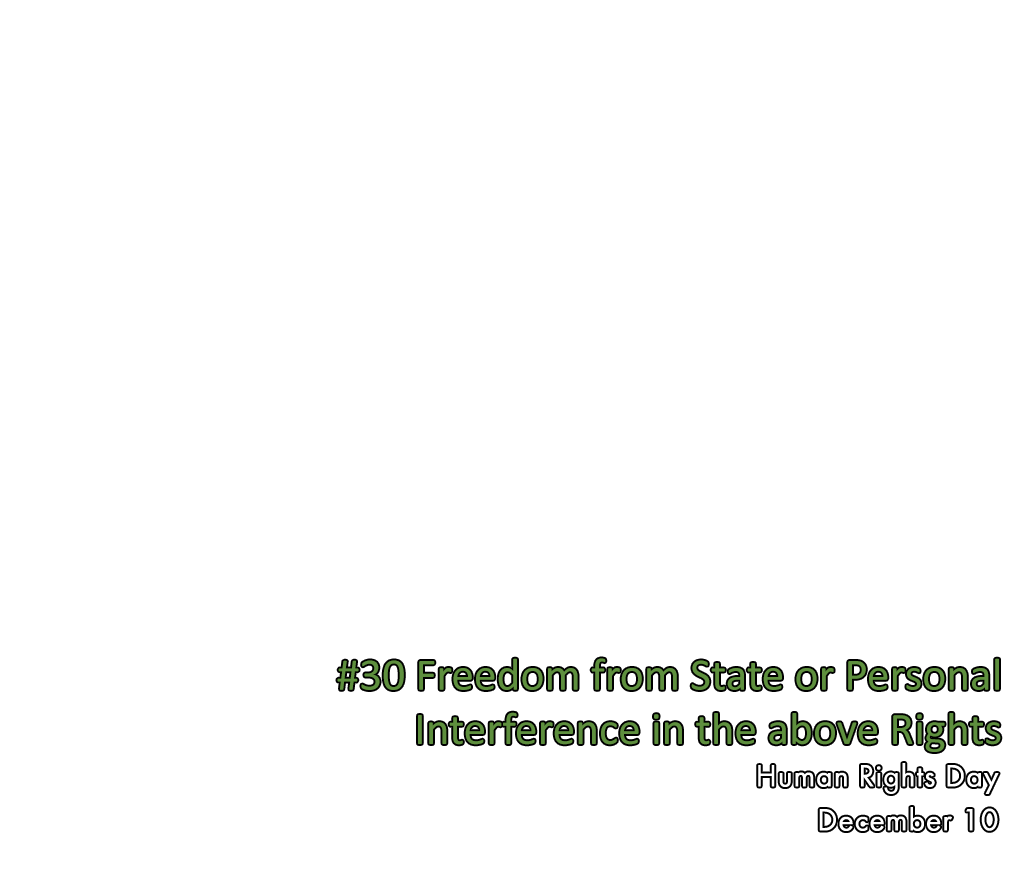
<style>
.page{position:relative;width:1030px;height:880px;background:#ffffff}
.page>*{position:absolute;margin:0}
.t1{font:45.4px "Calibri";color:#5e8f3e}
</style>
<div class="page">
<p class="t1" style="left:337px;top:658px;width:664px;height:94px;text-align:right">#30 Freedom from State or Personal<br>Interference in the above Rights</p>
</div>
